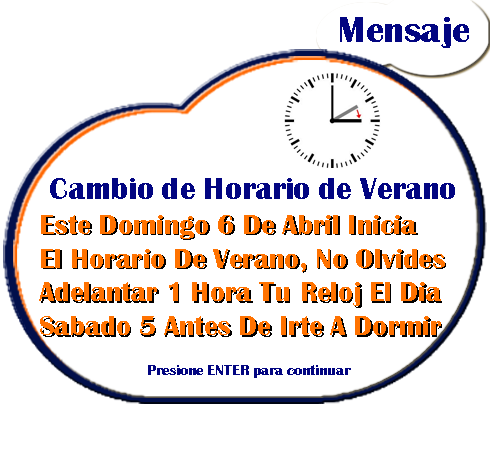
<style>
.page{position:relative;width:490px;height:461px;background:#ffffff}
.page>*{position:absolute;margin:0}
.t1{font:37.2px "BritannicBold";color:#020581}
.t2{font:31.5px "BritannicBold";color:#020581}
.t3{font:28.1px "BritannicBold";color:#ff7200}
.t4{font:28.1px "BritannicBold"}
.t5{font:14.7px "BritannicBold";color:#020581}
</style>
<div class="page">
<p class="t1" style="left:340px;top:17px;width:129px;height:31px">Mensaje</p>
<p class="t2" style="left:50px;top:178px;width:405px;height:21px">Cambio de Horario de Verano</p>
<p class="t3" style="left:39px;top:215px;width:406px;height:120px">Este Domingo 6 De Abril Inicia <br>El Horario De Verano, No Olvides <br>Adelantar 1 Hora Tu Reloj El Dia <br>Sabado 5 Antes De Irte A Dormir</p>
<p class="t4" style="left:41px;top:216px;width:405px;height:121px">Este Domingo 6 De Abril Inicia <br>El Horario De Verano, No Olvides <br>Adelantar 1 Hora Tu Reloj El Dia <br>Sabado 5 Antes De Irte A Dormir</p>
<p class="t5" style="left:148px;top:365px;width:203px;height:13px">Presione ENTER para continuar</p>
</div>
